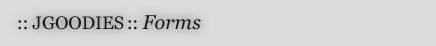
<style>
.page{position:relative;width:436px;height:46px;background:#dddcdc}
.page>*{position:absolute;margin:0}
.t1{font:18px "Georgia";color:#191919}
.t2{font:20px "Georgia-Italic";color:#191919}
</style>
<div class="page">
<p class="t1" style="left:18px;top:15px;width:183px;height:15px">:: JGOODIES :: <span class="t2">Forms</span></p>
</div>
